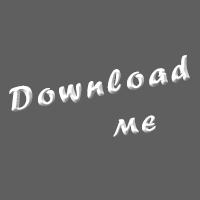
<style>
.page{position:relative;width:200px;height:200px;background:#5f5f5f}
.page>*{position:absolute;margin:0}
.t1{font:60px "ForteMT";letter-spacing:0.1em}
.t2{font:60px "ForteMT";letter-spacing:0.1em;color:#ffffff;font-variant:small-caps}
</style>
<div class="page">
<p class="t1" style="left:9px;top:55px;width:181px;height:57px;rotate:-10deg">Download</p>
<p class="t2" style="left:113px;top:115px;width:43px;height:22px;rotate:-7deg">me</p>
</div>
